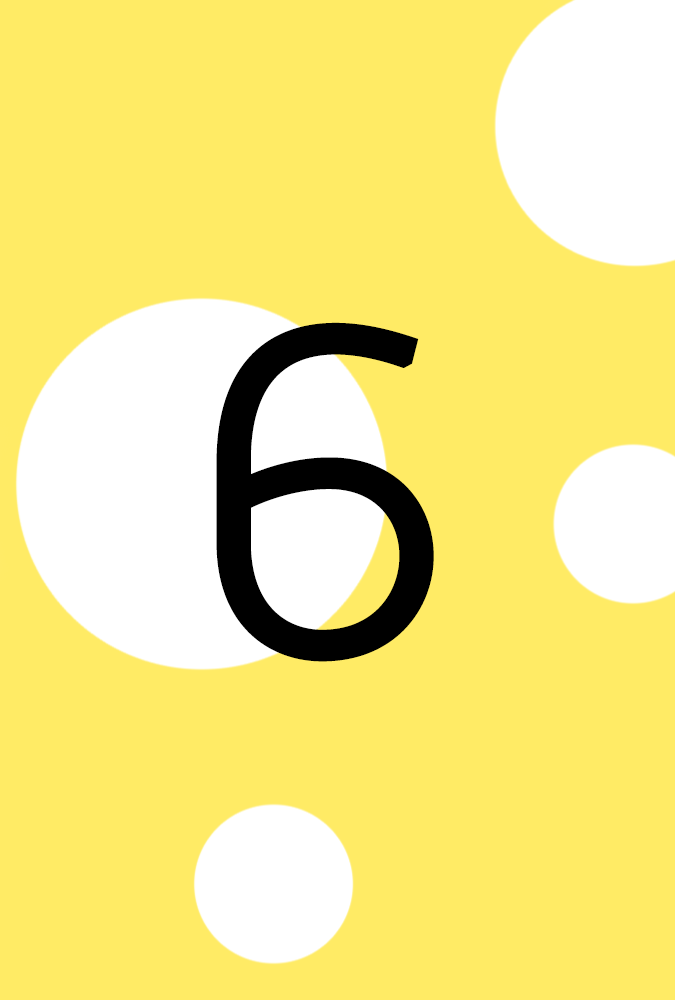
<style>
.page{position:relative;width:675px;height:1000px;background:#ffeb65}
.page>*{position:absolute;margin:0}
.t1{font:450px "Quark-Light";letter-spacing:0.03em;color:#000000;font-weight:bold;scale:1.07 1}
</style>
<div class="page">
<p class="t1" style="left:216px;top:322px;width:218px;height:340px">6</p>
</div>
